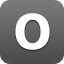
<style>
.page{position:relative;width:64px;height:64px}
.page>*{position:absolute;margin:0}
.t1{font:48px "Tahoma-Bold";color:#ffffff}
</style>
<div class="page">
<p class="t1" style="left:15px;top:13px;width:35px;height:37px">O</p>
</div>
